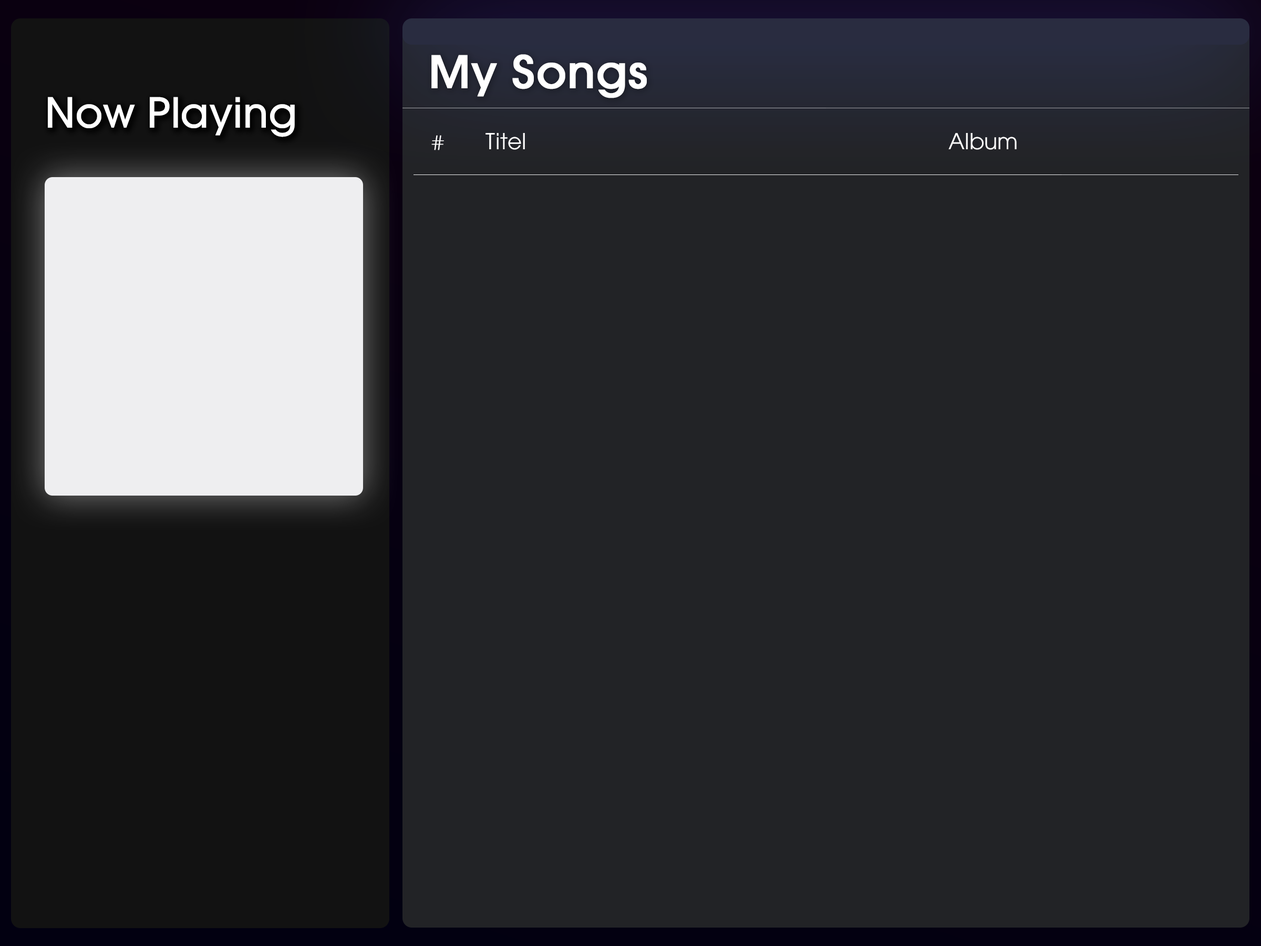
<style>
.page{position:relative;width:1261px;height:946px;background:#222326}
.page>*{position:absolute;margin:0}
.t1{font:44.2px "ITCAvantGardeStd-Md";color:#ffffff;font-weight:bold}
.t2{font:41.4px "ITCAvantGardeStd-Md";color:#ffffff}
.t3{font:21.9px "ITCAvantGardeStd-XLt";color:#ffffff;font-weight:bold}
.t4{font:21.9px "ITCAvantGardeStd-Bk";color:#ffffff}
</style>
<div class="page">
<p class="t1" style="left:431px;top:54px;width:216px;height:44px">My Songs</p>
<p class="t2" style="left:48px;top:97px;width:247px;height:40px">Now Playing</p>
<p class="t3" style="left:431px;top:135px;width:13px;height:15px">#</p>
<p class="t4" style="left:485px;top:133px;width:40px;height:17px">Titel</p>
<p class="t4" style="left:948px;top:133px;width:69px;height:17px">Album</p>
</div>
